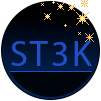
<style>
.page{position:relative;width:101px;height:101px;background:#ffffff}
.page>*{position:absolute;margin:0}
.t1{font:36px "MyriadPro-Regular";letter-spacing:0.075em;color:#214fc6}
</style>
<div class="page">
<p class="t1" style="left:11px;top:41px;width:81px;height:25px">ST3K</p>
</div>
